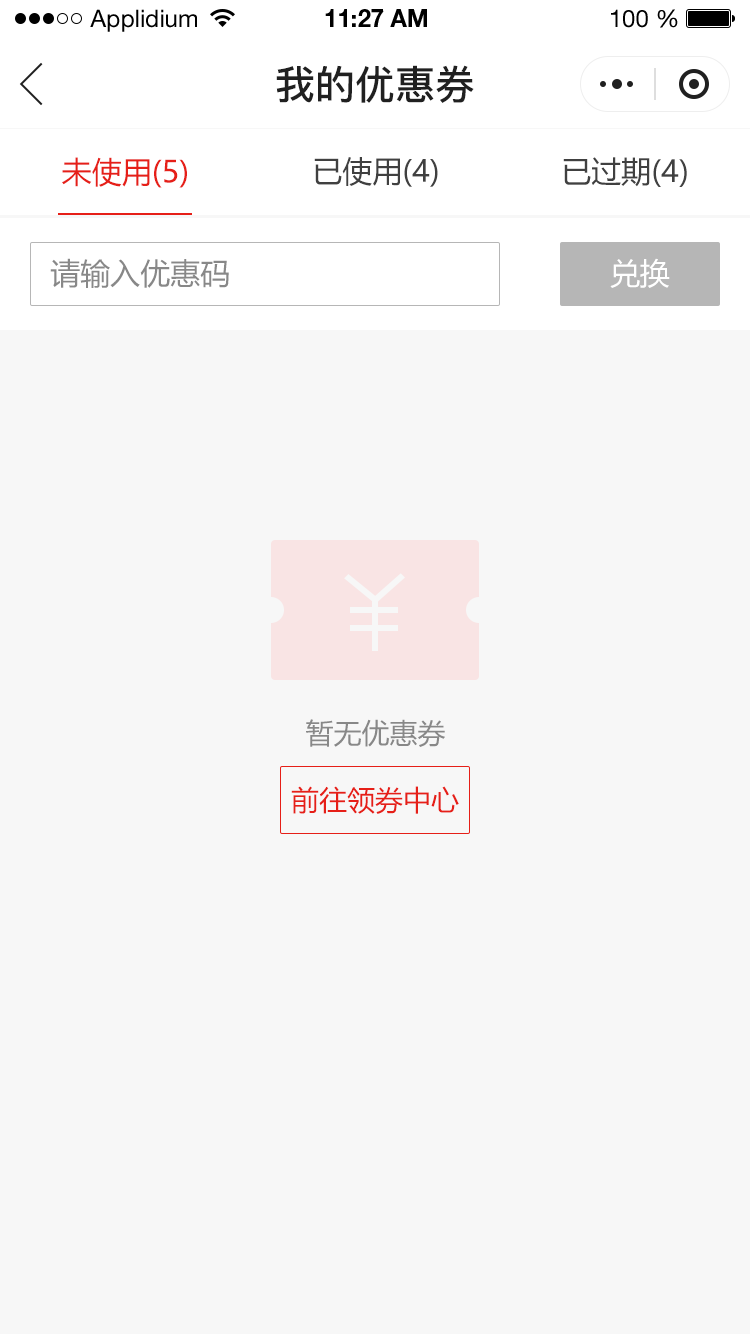
<style>
.page{position:relative;width:750px;height:1334px;background:#f7f7f7}
.page>*{position:absolute;margin:0}
.t1{font:24px "HelveticaNeueLTStd-Roman";color:#000000}
.t2{font:24px "HelveticaNeueLTStd-Bd";color:#000000}
.t3{font:40px "PingFang-SC-Bold";color:#202020;text-transform:uppercase}
.t4{font:30px "MicrosoftYaHei";color:#e61f18;text-transform:uppercase}
.t5{font:30px "MicrosoftYaHei";color:#404040;text-transform:uppercase}
.t6{font:30px "MicrosoftYaHei";color:#888888;text-transform:uppercase}
.t7{font:30px "MicrosoftYaHei";color:#ffffff;text-transform:uppercase}
.t8{font:28px "MicrosoftYaHei";color:#888888;text-transform:uppercase}
.t9{font:28px "MicrosoftYaHei";color:#e61f18;text-transform:uppercase}
</style>
<div class="page">
<p class="t1" style="left:90px;top:9px;width:107px;height:23px">Applidium</p>
<p class="t2" style="left:325px;top:9px;width:102px;height:18px">11:27 AM</p>
<p class="t1" style="left:611px;top:9px;width:67px;height:19px">100 %</p>
<p class="t3" style="left:276px;top:65px;width:198px;height:38px">我的优惠券</p>
<p class="t4" style="left:62px;top:157px;width:125px;height:31px">未使用(5)</p>
<p class="t5" style="left:314px;top:157px;width:124px;height:30px">已使用(4)</p>
<p class="t5" style="left:563px;top:157px;width:124px;height:30px">已过期(4)</p>
<p class="t6" style="left:50px;top:258px;width:179px;height:30px">请输入优惠码</p>
<p class="t7" style="left:610px;top:258px;width:60px;height:30px">兑换</p>
<p class="t8" style="left:306px;top:719px;width:139px;height:28px">暂无优惠券</p>
<p class="t9" style="left:291px;top:786px;width:168px;height:28px">前往领券中心</p>
</div>
